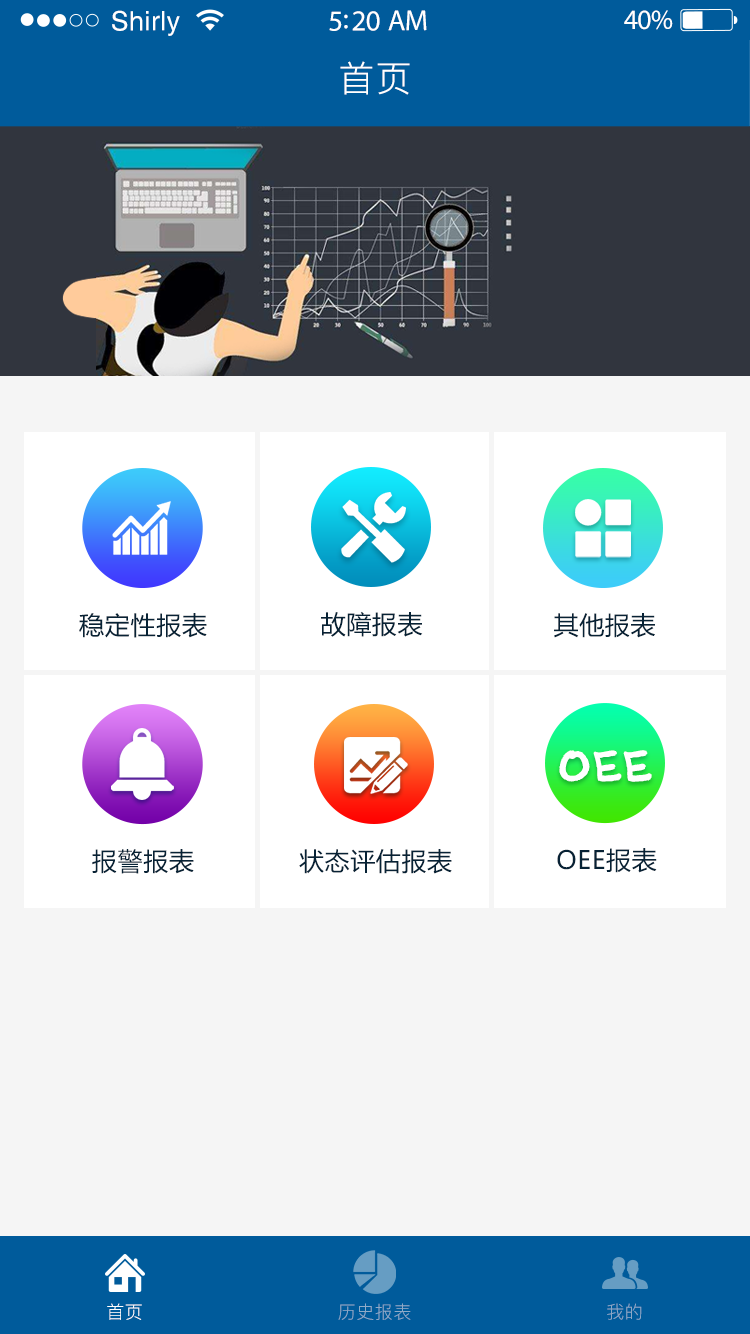
<style>
.page{position:relative;width:750px;height:1334px;background:#f5f5f5}
.page>*{position:absolute;margin:0}
.t1{font:26.8px "Helvetica";letter-spacing:0.02em;color:#ffffff}
.t2{font:29.1px "MyriadPro-Regular";letter-spacing:-0.02em;color:#ffffff}
.t3{font:27.9px "MyriadPro-Regular";letter-spacing:-0.02em;color:#ffffff}
.t4{font:36px "PingFang-SC-Regular";letter-spacing:0.03em;color:#ffffff}
.t5{font:25px "MicrosoftYaHei";letter-spacing:0.025em;color:#072235}
.t6{font:42px "AxureHandwriting-Bold";letter-spacing:0.025em;color:#ffffff;font-weight:bold}
.t7{font:18px "PingFang-SC-Regular";letter-spacing:0.03em;color:#ffffff}
.t8{font:18px "PingFang-SC-Regular";letter-spacing:0.03em;color:#8fabc8}
.t9{font:18px "PingFang-SC-Regular";letter-spacing:0.03em;color:#8da8c6}
</style>
<div class="page">
<p class="t1" style="left:112px;top:10px;width:68px;height:26px">Shirly</p>
<p class="t2" style="left:329px;top:10px;width:98px;height:21px">5:20 AM</p>
<p class="t3" style="left:624px;top:10px;width:49px;height:20px">40%</p>
<p class="t4" style="left:340px;top:61px;width:70px;height:34px">首页</p>
<p class="t5" style="left:79px;top:613px;width:128px;height:25px">稳定性报表</p>
<p class="t5" style="left:321px;top:611px;width:102px;height:26px">故障报表</p>
<p class="t5" style="left:554px;top:613px;width:101px;height:25px">其他报表</p>
<p class="t6" style="left:559px;top:750px;width:93px;height:32px">OEE</p>
<p class="t5" style="left:92px;top:849px;width:102px;height:25px">报警报表</p>
<p class="t5" style="left:299px;top:849px;width:153px;height:25px">状态评估报表</p>
<p class="t5" style="left:557px;top:848px;width:100px;height:25px">OEE报表</p>
<p class="t7" style="left:107px;top:1303px;width:35px;height:17px">首页</p>
<p class="t8" style="left:338px;top:1303px;width:73px;height:17px">历史报表</p>
<p class="t9" style="left:607px;top:1303px;width:35px;height:17px">我的</p>
</div>
